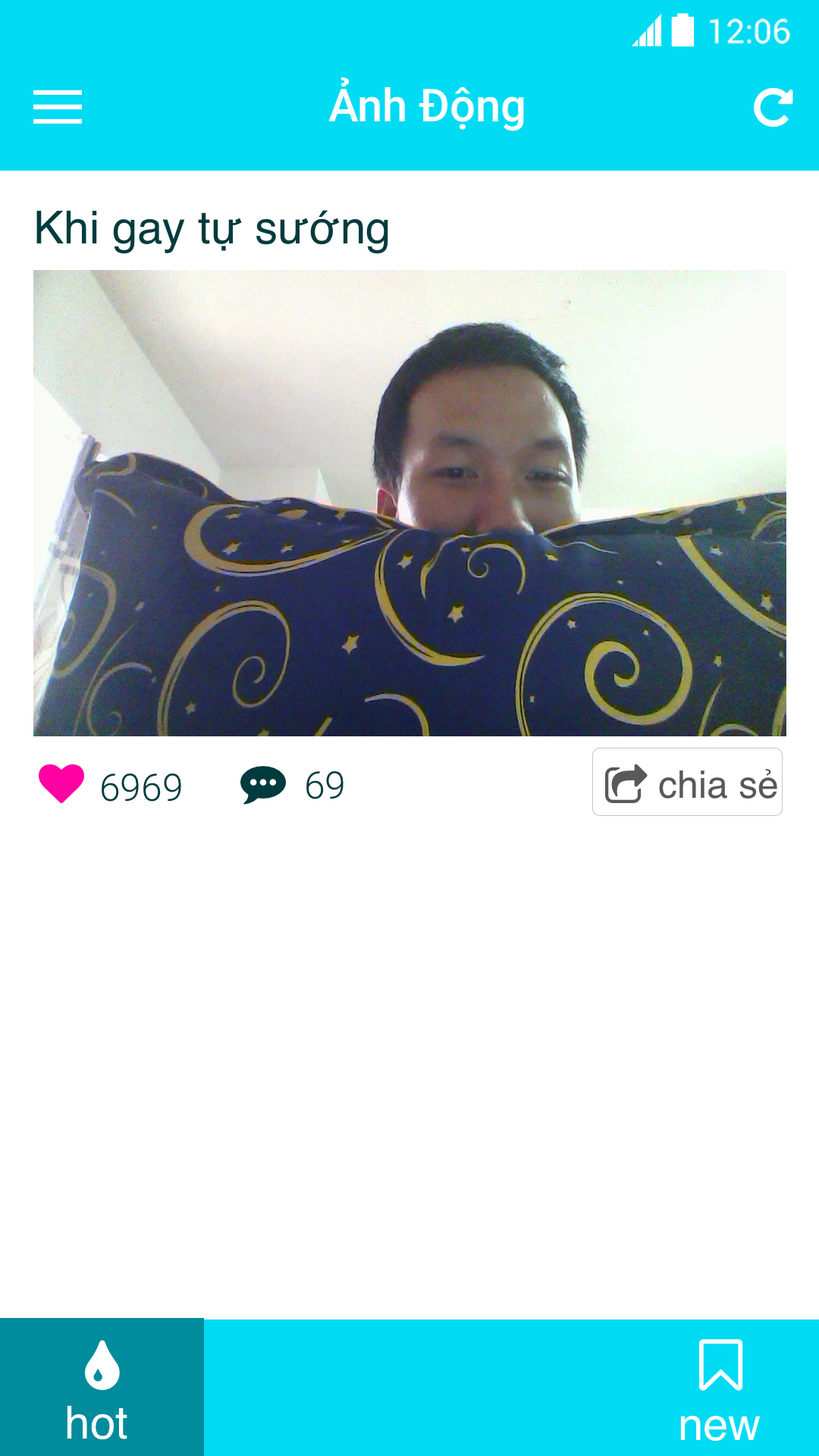
<style>
.page{position:relative;width:819px;height:1456px;background:#ffffff}
.page>*{position:absolute;margin:0}
.t1{font:33.1px "Roboto-Regular";color:#ffffff}
.t2{font:45.5px "Roboto-Medium";color:#ffffff}
.t3{font:45.5px "Helvetica";color:#013b3d}
.t4{font:37.9px "Roboto-Light";color:#013b3d}
.t5{font:37.9px "Helvetica";color:#595858}
.t6{font:45.5px "Helvetica";color:#ffffff}
</style>
<div class="page">
<p class="t1" style="left:710px;top:18px;width:80px;height:26px">12:06</p>
<p class="t2" style="left:328px;top:77px;width:196px;height:54px">Ảnh Động</p>
<p class="t3" style="left:36px;top:210px;width:352px;height:44px">Khi gay tự sướng</p>
<p class="t4" style="left:102px;top:773px;width:79px;height:29px">6969</p>
<p class="t4" style="left:306px;top:771px;width:38px;height:28px">69</p>
<p class="t5" style="left:659px;top:769px;width:118px;height:30px">chia sẻ</p>
<p class="t6" style="left:67px;top:1405px;width:60px;height:35px">hot</p>
<p class="t6" style="left:680px;top:1415px;width:81px;height:27px">new</p>
</div>
